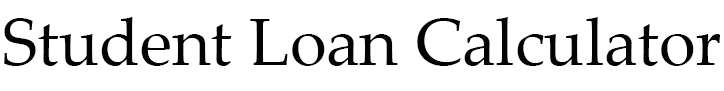
<style>
.page{position:relative;width:724px;height:91px;background:#ffffff}
.page>*{position:absolute;margin:0}
.t1{font:66.7px "PalatinoLinotype-Roman";color:#030303}
</style>
<div class="page">
<p class="t1" style="left:4px;top:17px;width:717px;height:49px">Student Loan Calculator</p>
</div>
